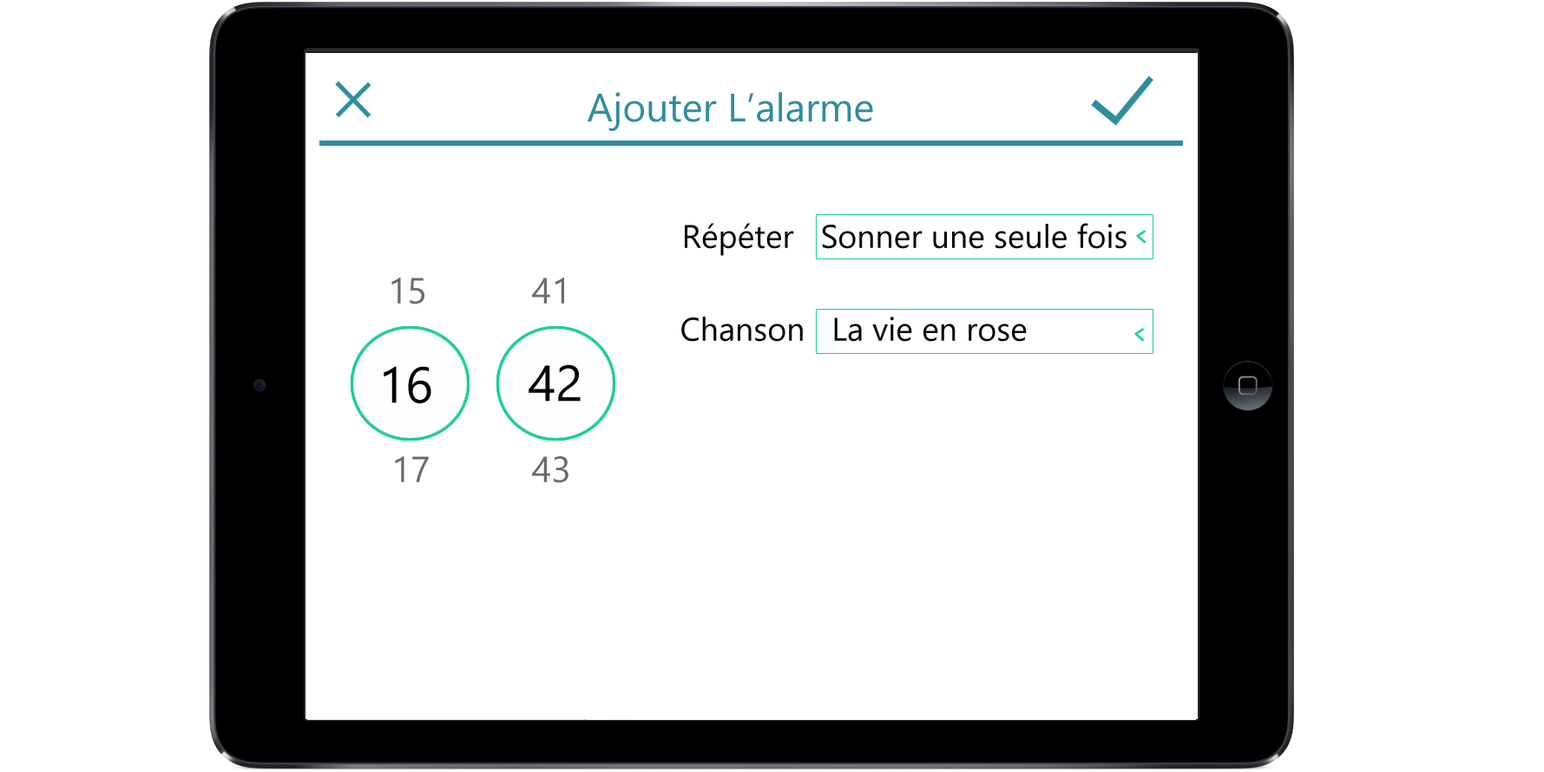
<style>
.page{position:relative;width:1544px;height:772px;background:#ffffff}
.page>*{position:absolute;margin:0}
.t1{font:39.8px "NirmalaUI";color:#308d9e}
.t2{font:32.5px "NirmalaUI";color:#000201}
.t3{font:36.2px "NirmalaUI";color:#696c6b}
.t4{font:50.6px "NirmalaUI";color:#000201}
</style>
<div class="page">
<p class="t1" style="left:588px;top:92px;width:285px;height:39px">Ajouter L’alarme</p>
<p class="t2" style="left:685px;top:223px;width:441px;height:33px">Répéter   Sonner une seule fois</p>
<p class="t3" style="left:391px;top:278px;width:33px;height:27px">15</p>
<p class="t3" style="left:532px;top:278px;width:32px;height:26px">41</p>
<p class="t2" style="left:681px;top:317px;width:346px;height:25px">Chanson   La vie en rose</p>
<p class="t4" style="left:529px;top:364px;width:52px;height:38px">42</p>
<p class="t4" style="left:384px;top:366px;width:47px;height:38px">16</p>
<p class="t3" style="left:395px;top:456px;width:34px;height:27px">17</p>
<p class="t3" style="left:532px;top:456px;width:36px;height:27px">43</p>
</div>
